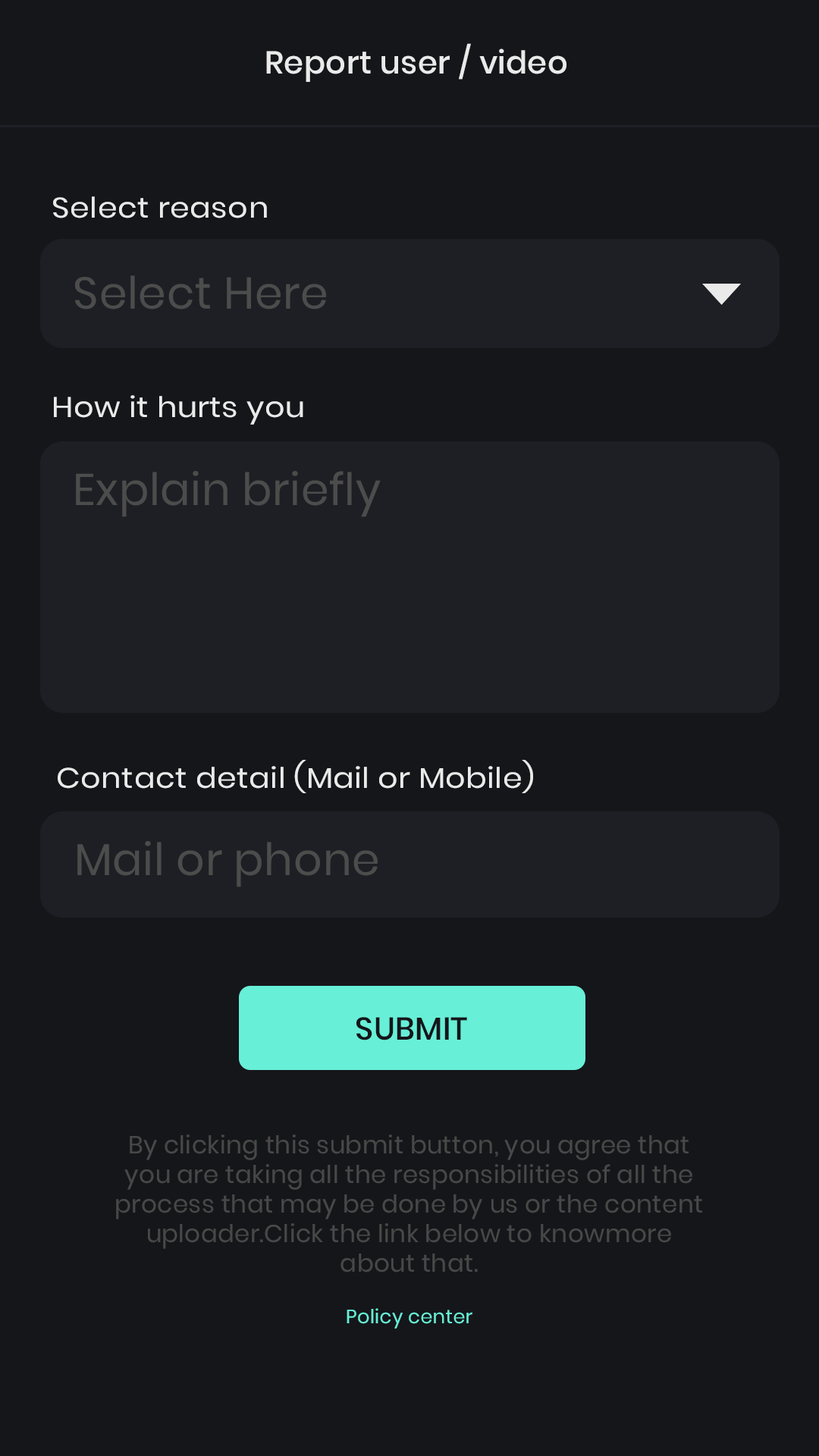
<style>
.page{position:relative;width:819px;height:1456px;background:#15161a}
.page>*{position:absolute;margin:0}
.t1{font:31.6px "Poppins-Medium";letter-spacing:0.01em;color:#eaeaea}
.t2{font:28.4px "Poppins-Regular";letter-spacing:0.01em;color:#eaeaea;scale:1.1 1}
.t3{font:44.5px "Poppins-Regular";letter-spacing:0.01em;color:#4c4c4c}
.t4{font:31.6px "Poppins-Medium";letter-spacing:0.01em;color:#15161a}
.t5{font:24.6px/29.6px "Poppins-Regular";letter-spacing:0.01em;color:#484848}
.t6{font:19.4px "Poppins-Regular";letter-spacing:0.01em;color:#67efd7}
</style>
<div class="page">
<p class="t1" style="left:266px;top:43px;width:300px;height:39px">Report user / video</p>
<p class="t2" style="left:53px;top:196px;width:214px;height:22px">Select reason</p>
<p class="t3" style="left:75px;top:275px;width:251px;height:34px">Select Here</p>
<p class="t2" style="left:54px;top:395px;width:249px;height:30px">How it hurts you</p>
<p class="t3" style="left:76px;top:471px;width:305px;height:46px">Explain briefly</p>
<p class="t2" style="left:58px;top:760px;width:475px;height:33px">Contact detail (Mail or Mobile)</p>
<p class="t3" style="left:77px;top:841px;width:301px;height:46px">Mail or phone</p>
<p class="t4" style="left:356px;top:1017px;width:111px;height:23px">SUBMIT</p>
<p class="t5" style="left:116px;top:1134px;width:586px;height:138px;text-align:center">By clicking this submit button, you agree that<br>you are taking all the responsibilities of all the<br>process that may be done by us or the content<br>uploader.Click the link below to knowmore<br>about that.</p>
<p class="t6" style="left:347px;top:1308px;width:125px;height:21px">Policy center</p>
</div>
